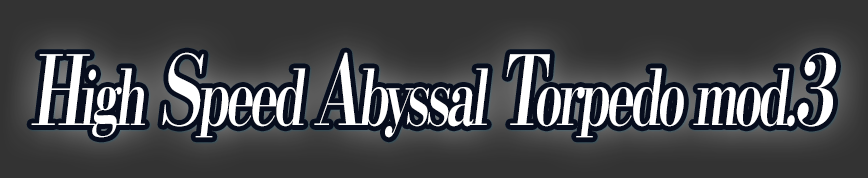
<style>
.page{position:relative;width:868px;height:178px;background:#333333}
.page>*{position:absolute;margin:0}
.t1{font:76.8px "KochoStd-Heavy";letter-spacing:-0.08em;color:#ffffff;font-style:italic;scale:0.67 1}
.t2{font:96px "KochoStd-Heavy";letter-spacing:-0.08em;color:#ffffff;font-style:italic;scale:0.67 1}
</style>
<div class="page">
<p class="t1" style="left:31px;top:52px;width:805px;height:86px"><span class="t2">H</span>igh<span class="t2"> S</span>peed <span class="t2">A</span>byssal<span class="t2"> T</span>orpedo mod.<span class="t2">3</span></p>
</div>
